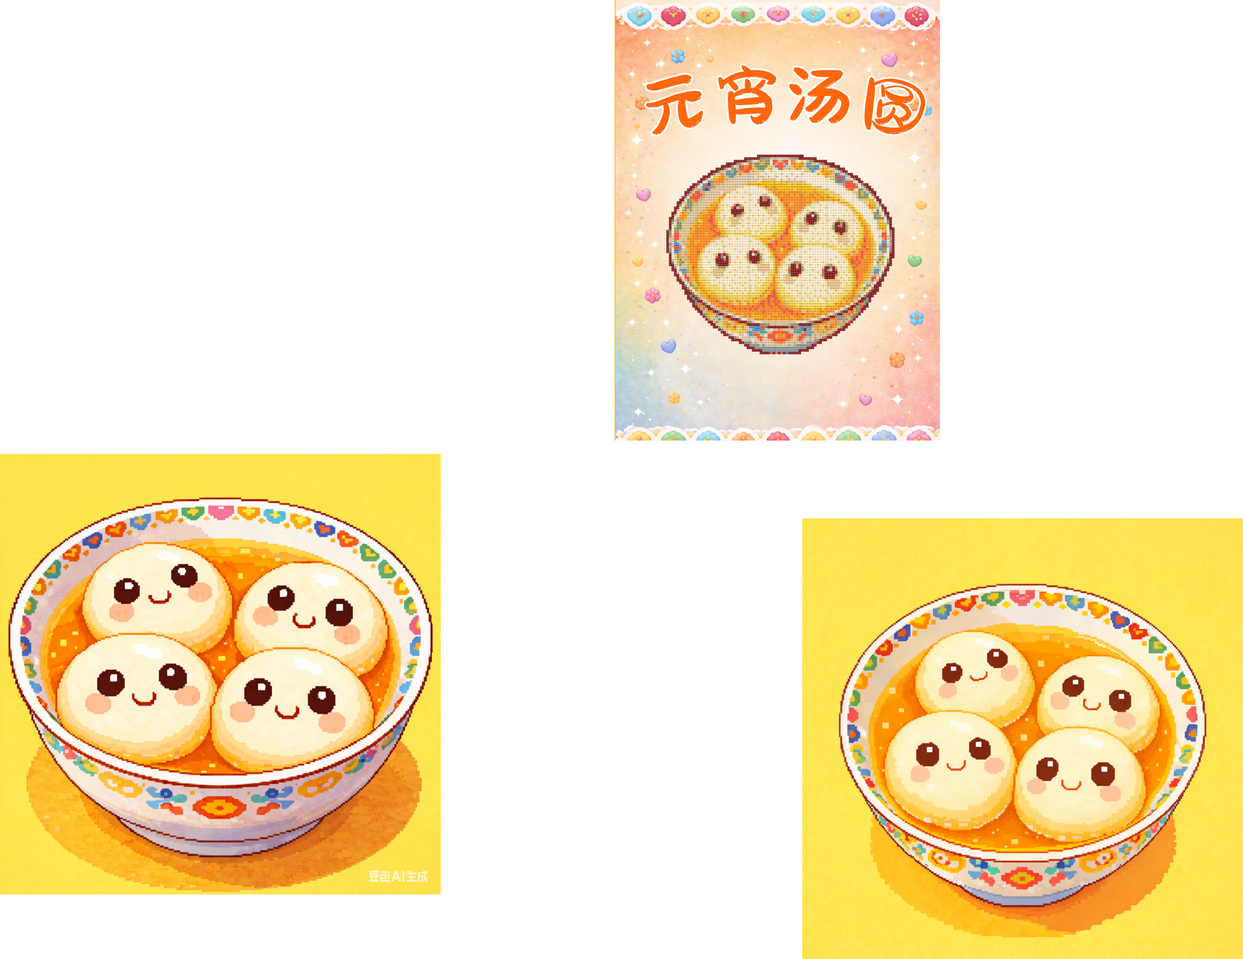
<style>
.page{position:relative;width:1243px;height:959px;background:#ffffff}
.page>*{position:absolute;margin:0}
.t1{font:69.1px "LiuHuanKaTongShouShu";color:#ff670c}
</style>
<div class="page">
<p class="t1" style="left:646px;top:65px;width:279px;height:70px">元宵汤圆</p>
</div>
